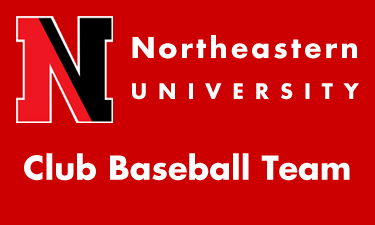
<style>
.page{position:relative;width:375px;height:225px;background:#cc0000}
.page>*{position:absolute;margin:0}
.t1{font:28px "FuturaStd-Bold";color:#ffffff}
.t2{font:21px "FuturaStd-Bold";color:#ffffff}
.t3{font:32px "FuturaStd-Bold";color:#ffffff}
</style>
<div class="page">
<p class="t1" style="left:132px;top:35px;width:227px;height:65px;text-align:justify">Northeastern<br><br><span class="t2">UNIVERSITY</span></p>
<p class="t3" style="left:24px;top:153px;width:326px;height:28px">Club Baseball Team</p>
</div>
